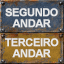
<style>
.page{position:relative;width:64px;height:64px}
.page>*{position:absolute;margin:0}
.t1{font:10.7px/10.7px "Arial-BoldMT";letter-spacing:-0.04em;color:#e8e8e8;text-transform:uppercase;font-weight:bold}
</style>
<div class="page">
<p class="t1" style="left:5px;top:8px;width:53px;height:20px;text-align:center">sEGUNDO<br>ANDAR</p>
<p class="t1" style="left:5px;top:38px;width:54px;height:20px;text-align:center">TERCEIRO<br>andar</p>
</div>
